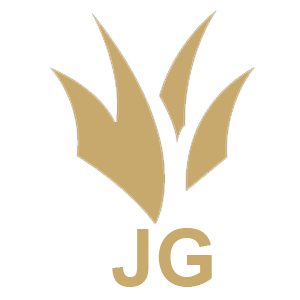
<style>
.page{position:relative;width:300px;height:300px;background:#ffffff}
.page>*{position:absolute;margin:0}
.t1{font:79.4px "Arial-BoldMT";color:#c8aa6c}
</style>
<div class="page">
<p class="t1" style="left:112px;top:228px;width:100px;height:59px">JG</p>
</div>
